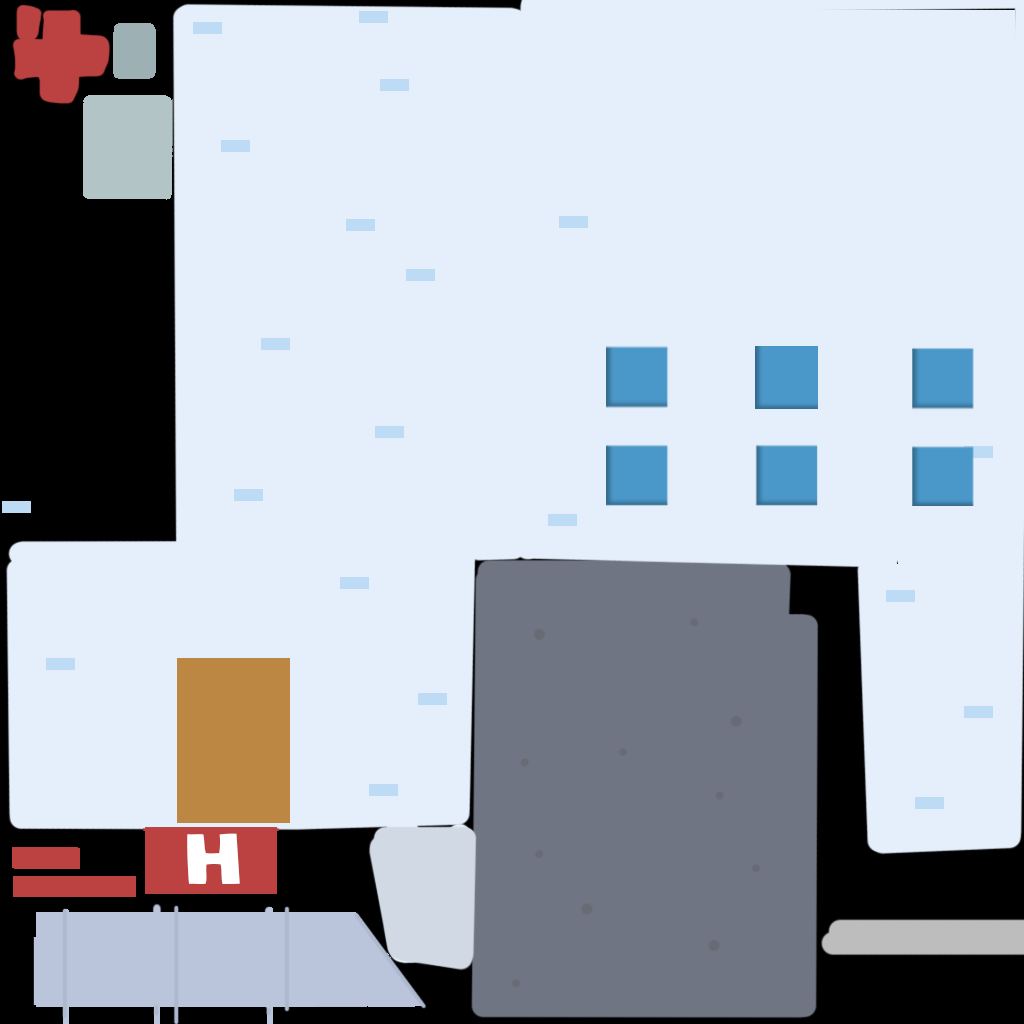
<style>
.page{position:relative;width:1024px;height:1024px;background:#e5effb}
.page>*{position:absolute;margin:0}
.t1{font:71.1px "LondrinaSolid-Regular";color:#ffffff;scale:1.72 1}
</style>
<div class="page">
<p class="t1" style="left:187px;top:833px;width:53px;height:51px">H</p>
</div>
